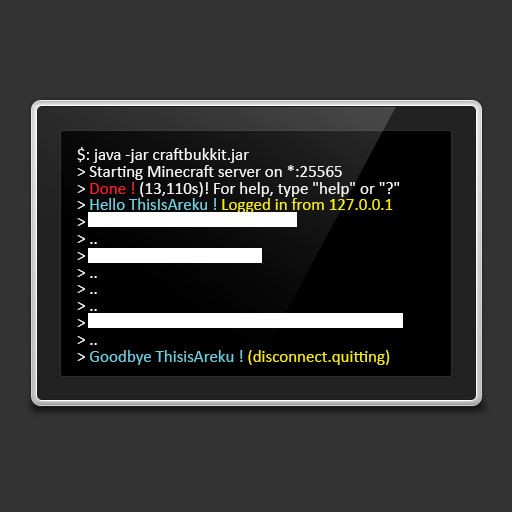
<style>
.page{position:relative;width:512px;height:512px;background:#333333}
.page>*{position:absolute;margin:0}
.t1{font:17px/16.8px "Calibri";color:#f5f5f5}
.t2{font:17px/16.8px "Calibri";color:#ed1c24}
.t3{font:17px/16.8px "Calibri";color:#ffffff}
.t4{font:17px/16.8px "Calibri";color:#6fccdd}
.t5{font:17px/16.8px "Calibri";color:#f6eb00}
.t6{font:17px/16.8px "Calibri";color:#f6eb14}
</style>
<div class="page">
<p class="t1" style="left:77px;top:147px;width:323px;height:218px">$: java -jar craftbukkit.jar<br>&gt; Starting Minecraft server on *:25565<br>&gt; <span class="t2">Done !</span> (13,110s)! For help, type "help" or "?"<br><span class="t3">&gt; </span><span class="t4">Hello ThisIsAreku !</span><span class="t5"> Logged in from 127.0.0.1<br></span><span class="t3">&gt; ..<br>&gt; ..<br>&gt; ..<br>&gt; ..<br>&gt; ..<br>&gt; ..<br>&gt; ..<br>&gt; ..<br>&gt; </span><span class="t4">Goodbye ThisisAreku ! </span><span class="t6">(disconnect.quitting)</span></p>
</div>
